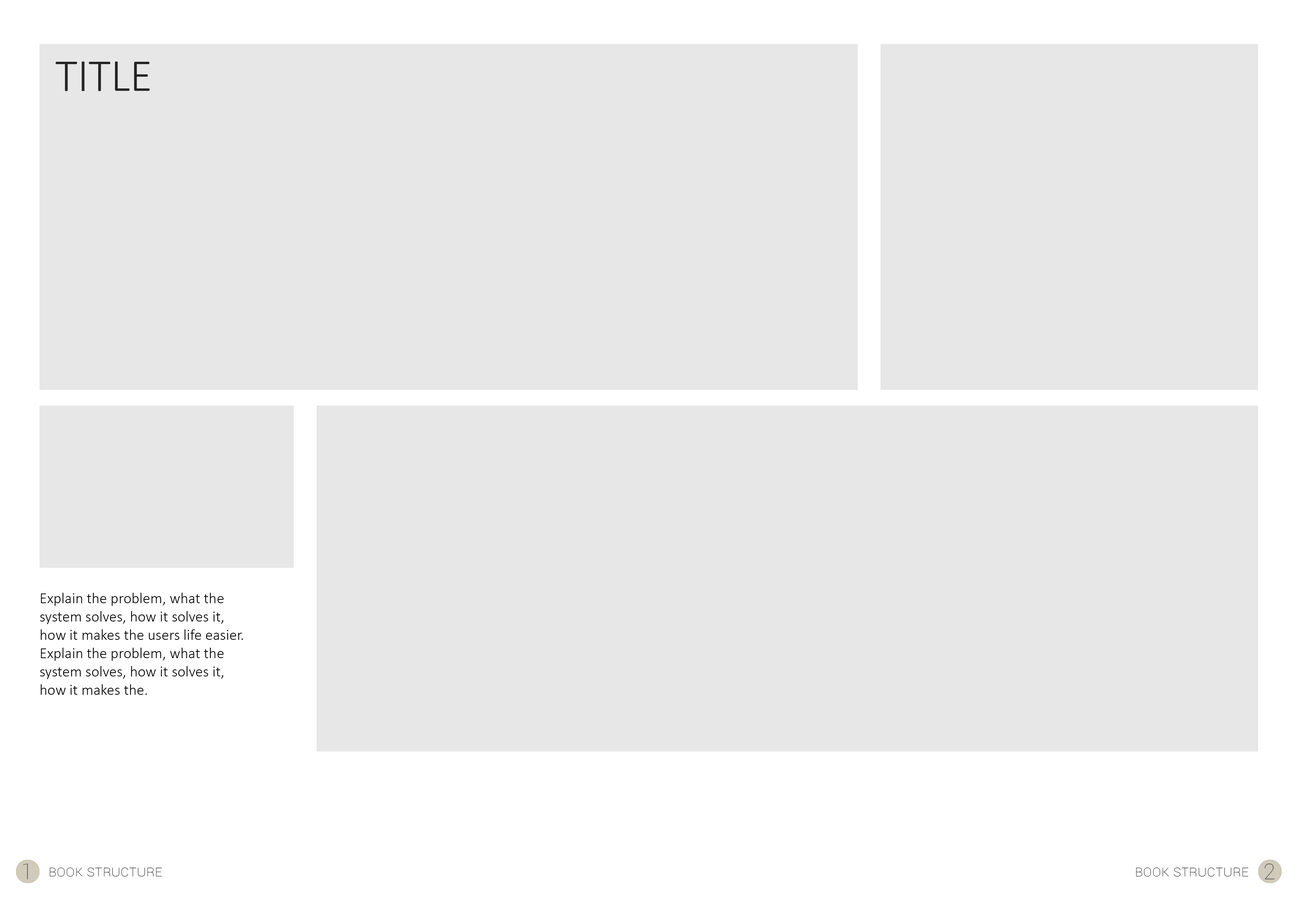
<style>
.page{position:relative;width:1299px;height:918px;background:#e7e7e7}
.page>*{position:absolute;margin:0}
.t1{font:45.8px "Calibri-Light";color:#242424;text-transform:uppercase}
.t2{font:15.3px "Calibri-Light";color:#000000}
.t3{font:21.8px "Roboto-Thin";color:#484848}
.t4{font:15.3px "Roboto-Thin";color:#000000;font-variant:small-caps}
</style>
<div class="page">
<p class="t1" style="left:55px;top:62px;width:95px;height:29px">title</p>
<p class="t2" style="left:40px;top:593px;width:203px;height:102px">Explain the problem, what the system solves, how it solves it, how it makes the users life easier. Explain the problem, what the system solves, how it solves it, how it makes the.</p>
<p class="t3" style="left:23px;top:864px;width:5px;height:16px">1</p>
<p class="t4" style="left:50px;top:868px;width:112px;height:9px">Book structure</p>
<p class="t4" style="left:1136px;top:868px;width:112px;height:9px">Book structure</p>
<p class="t3" style="left:1264px;top:864px;width:10px;height:16px">2</p>
</div>
